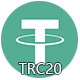
<style>
.page{position:relative;width:80px;height:80px;background:#53ae94}
.page>*{position:absolute;margin:0}
.t1{font:14px "MicrosoftYaHei";color:#ffffff}
</style>
<div class="page">
<p class="t1" style="left:18px;top:63px;width:44px;height:11px">TRC20</p>
</div>
